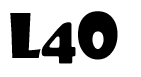
<style>
.page{position:relative;width:141px;height:77px;background:#ffffff}
.page>*{position:absolute;margin:0}
.t1{font:60px "ShowcardGothic-Reg";color:#000000}
.t2{font:60px "CooperBlack";color:#000000}
</style>
<div class="page">
<p class="t1" style="left:10px;top:11px;width:108px;height:53px">L<span class="t2">4</span>O</p>
</div>
